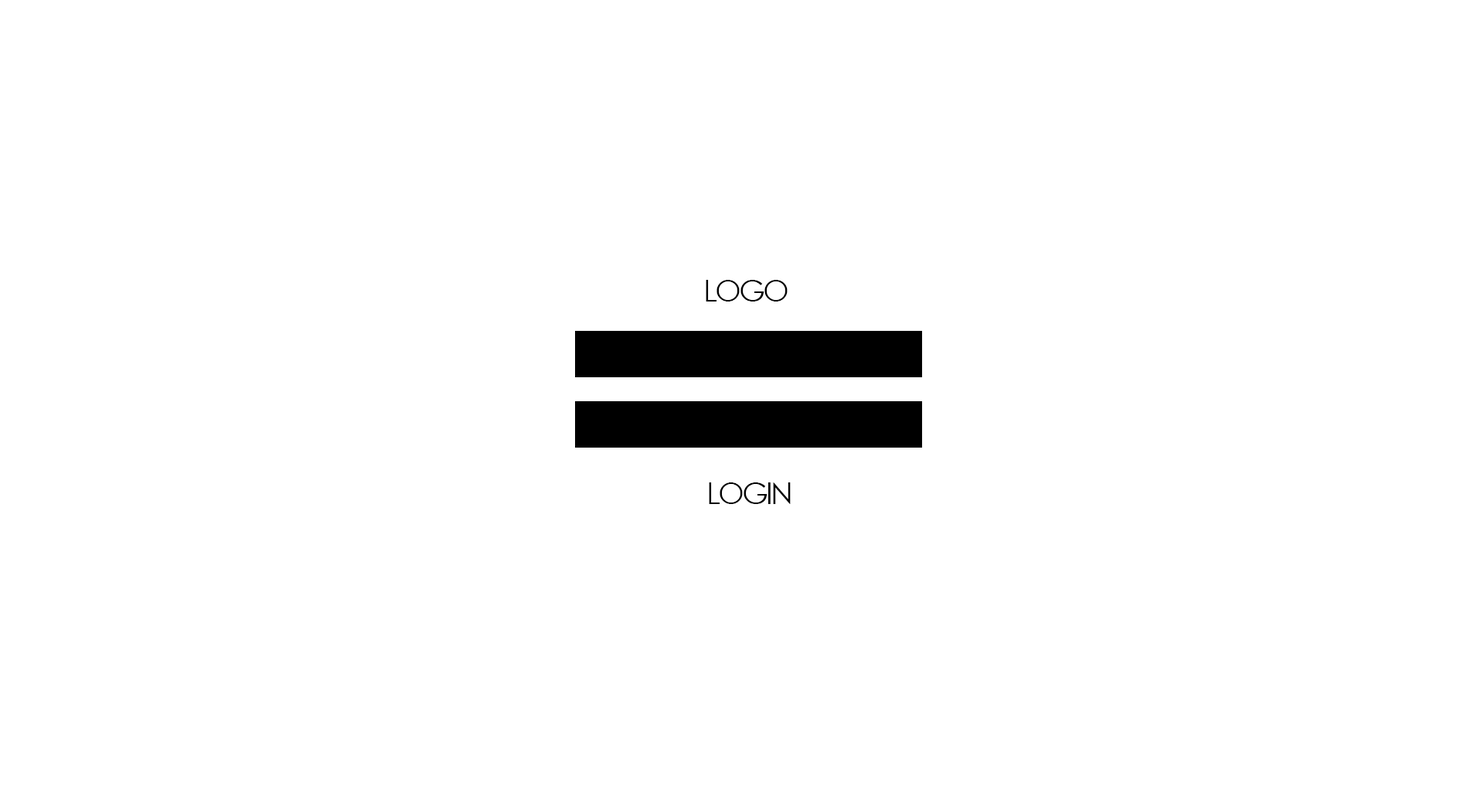
<style>
.page{position:relative;width:1484px;height:804px;background:#ffffff}
.page>*{position:absolute;margin:0}
.t1{font:29.8px "CenturyGothic";letter-spacing:-0.07em;color:#000000}
</style>
<div class="page">
<p class="t1" style="left:706px;top:280px;width:81px;height:21px">LOGO</p>
<p class="t1" style="left:709px;top:482px;width:82px;height:22px">LOGIN</p>
</div>
